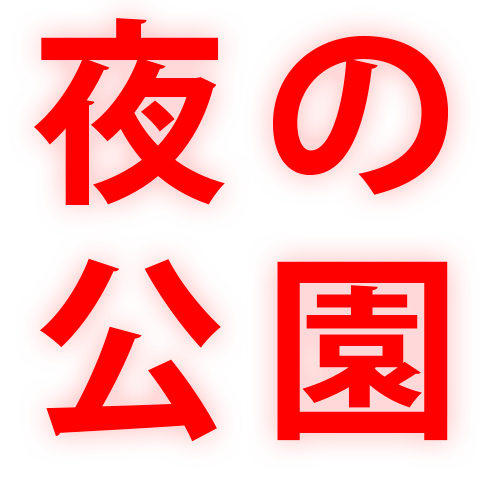
<style>
.page{position:relative;width:500px;height:500px;background:#ffffff}
.page>*{position:absolute;margin:0}
.t1{font:197px "KozGoPr6N-Bold";letter-spacing:0.18em;color:#ff0000}
</style>
<div class="page">
<p class="t1" style="left:34px;top:18px;width:414px;height:424px">夜の<br>公園</p>
</div>
